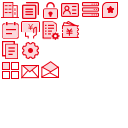
<style>
.page{position:relative;width:128px;height:128px;background:#ffffff}
.page>*{position:absolute;margin:0}
.t1{font:7.7px "MicrosoftYaHei";letter-spacing:0.05em;scale:1.13 1}
</style>
<div class="page">
<p class="t1" style="left:28px;top:24px;width:6px;height:6px">￥</p>
</div>
